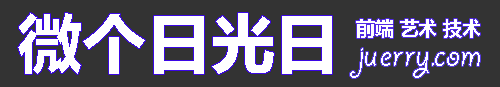
<style>
.page{position:relative;width:500px;height:87px;background:#333333}
.page>*{position:absolute;margin:0}
.t1{font:64.4px "MicrosoftYaHei-Bold";color:#ffffff}
.t2{font:18.7px "MicrosoftYaHei-Bold";color:#ffffff}
.t3{font:39.5px "GiddyupStd";color:#ffffff}
</style>
<div class="page">
<p class="t1" style="left:18px;top:13px;width:314px;height:61px">微个日光日</p>
<p class="t2" style="left:356px;top:19px;width:124px;height:19px">前端 艺术 技术</p>
<p class="t3" style="left:350px;top:48px;width:130px;height:30px">juerry.com</p>
</div>
